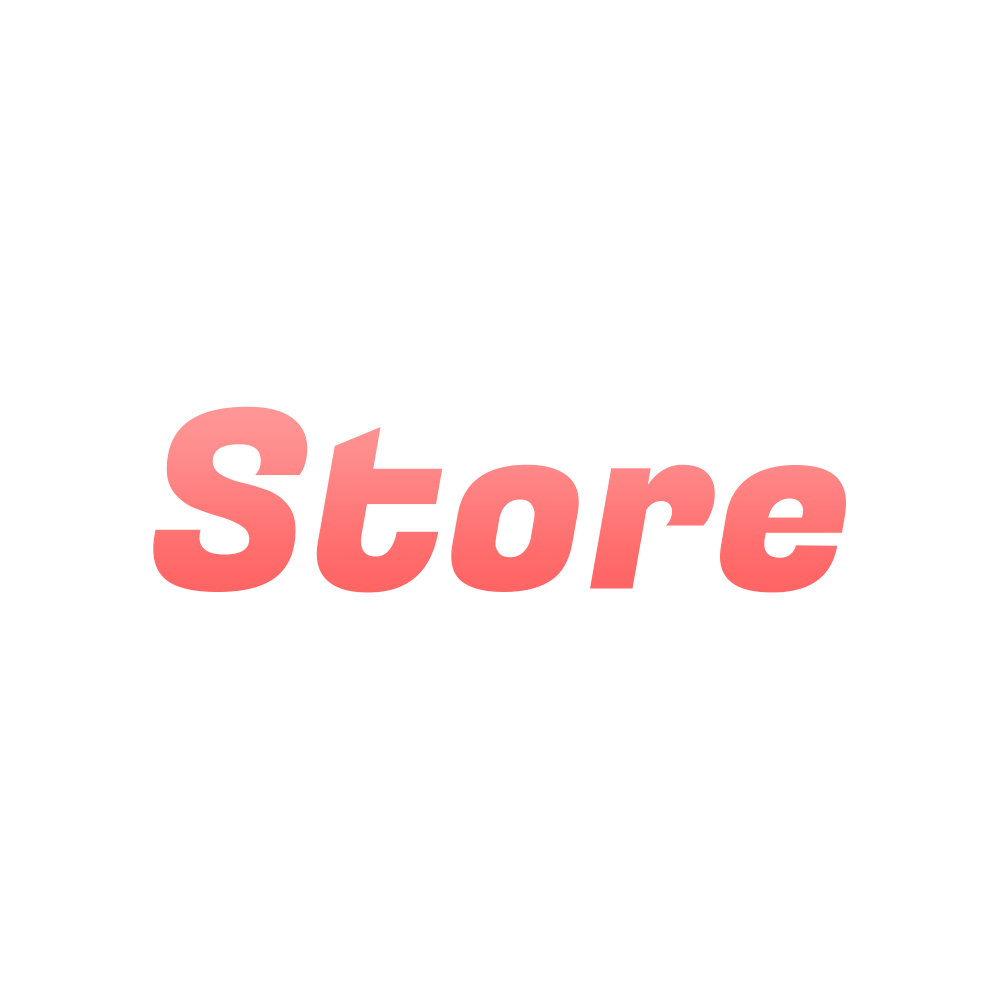
<style>
.page{position:relative;width:1000px;height:1000px;background:#ffffff}
.page>*{position:absolute;margin:0}
.t1{font:250px "FugazOne-Regular";color:#ff7878}
</style>
<div class="page">
<p class="t1" style="left:153px;top:406px;width:693px;height:187px">Store</p>
</div>
